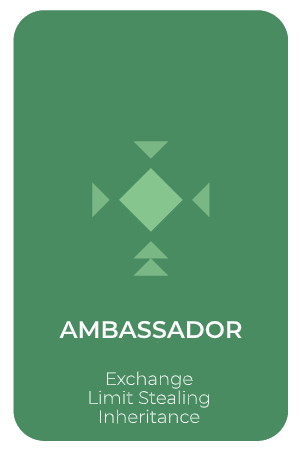
<style>
.page{position:relative;width:301px;height:451px;background:#4a8c62}
.page>*{position:absolute;margin:0}
.t1{font:24px "Montserrat-SemiBold";color:#ffffff}
.t2{font:18px "Montserrat-Light";color:#ffffff}
</style>
<div class="page">
<p class="t1" style="left:59px;top:320px;width:183px;height:19px">AMBASSADOR</p>
<p class="t2" style="left:107px;top:371px;width:86px;height:18px">Exchange</p>
<p class="t2" style="left:89px;top:390px;width:120px;height:18px">Limit Stealing</p>
<p class="t2" style="left:100px;top:409px;width:100px;height:15px">Inheritance</p>
</div>
